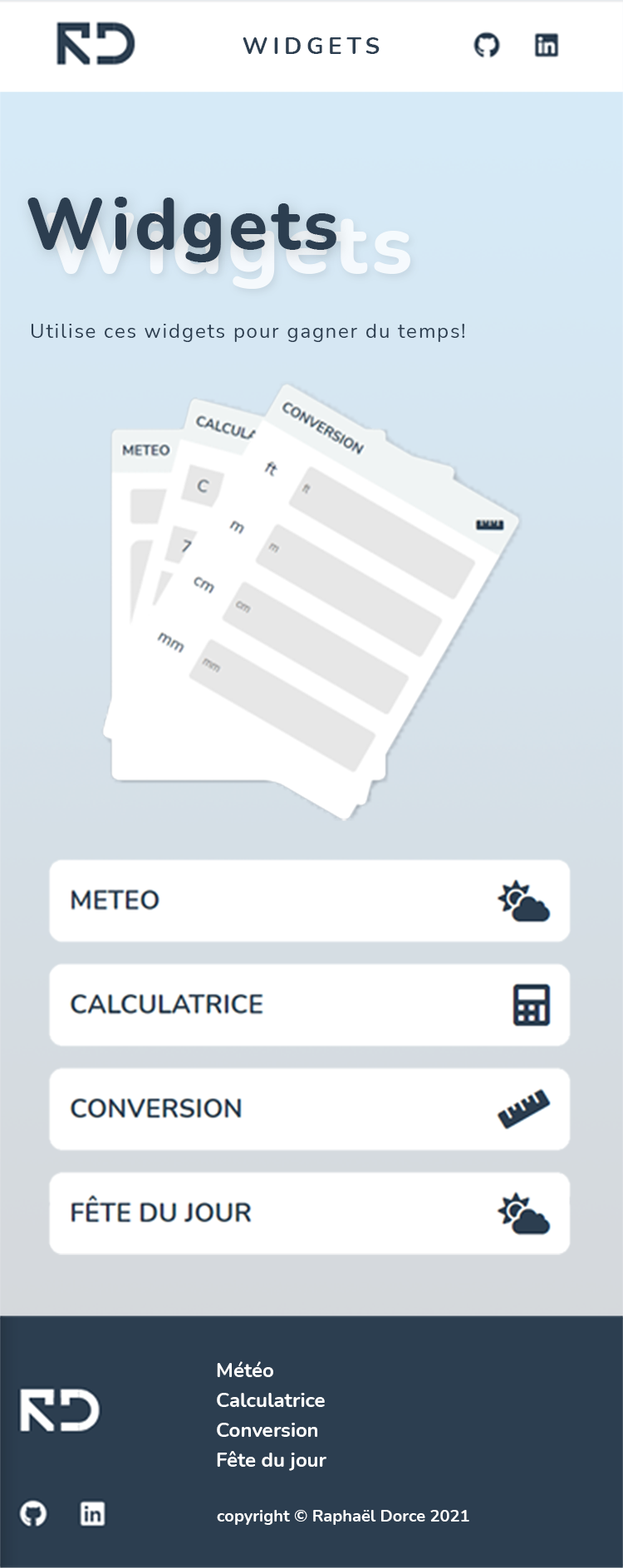
<style>
.page{position:relative;width:623px;height:1568px;background:#ffffff}
.page>*{position:absolute;margin:0}
.t1{font:23.2px "Nunito-Bold";letter-spacing:0.2em;color:#2c3e50;text-transform:uppercase}
.t2{font:71.6px "Nunito-ExtraBold";letter-spacing:0.05em;color:#2c3e50}
.t3{font:19.9px "Nunito-Regular";letter-spacing:0.075em;color:#2c3e50}
.t4{font:19.9px/29.9px "Nunito-Bold";color:#ffffff}
.t5{font:16.6px "Nunito-Bold";color:#ffffff}
</style>
<div class="page">
<p class="t1" style="left:242px;top:37px;width:137px;height:17px">WIDGETS</p>
<p class="t2" style="left:27px;top:197px;width:309px;height:65px">Widgets</p>
<p class="t3" style="left:31px;top:324px;width:434px;height:18px">Utilise ces widgets pour gagner du temps!</p>
<p class="t4" style="left:217px;top:1361px;width:109px;height:110px">Météo<br>Calculatrice<br>Conversion<br>Fête du jour</p>
<p class="t5" style="left:217px;top:1510px;width:252px;height:15px">copyright © Raphaël Dorce 2021</p>
</div>
